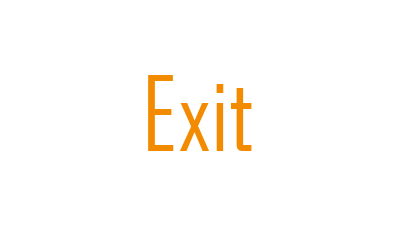
<style>
.page{position:relative;width:400px;height:225px;background:#ffffff}
.page>*{position:absolute;margin:0}
.t1{font:100px "AgencyFB-Reg";color:#f28b00}
</style>
<div class="page">
<p class="t1" style="left:148px;top:75px;width:104px;height:76px">Exit</p>
</div>
